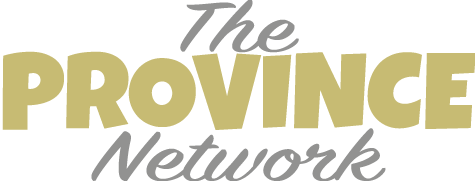
<style>
.page{position:relative;width:475px;height:181px;background:#ffffff}
.page>*{position:absolute;margin:0}
.t1{font:78.7px "SignPainter-HouseScript";color:#929291;scale:1.49 1}
.t2{font:107.8px "LuckiestGuy-Regular";color:#c7bb73}
</style>
<div class="page">
<p class="t1" style="left:180px;top:0px;width:119px;height:53px">The</p>
<p class="t2" style="left:2px;top:51px;width:474px;height:79px">PROVINCE</p>
<p class="t1" style="left:91px;top:128px;width:295px;height:54px">Network</p>
</div>
